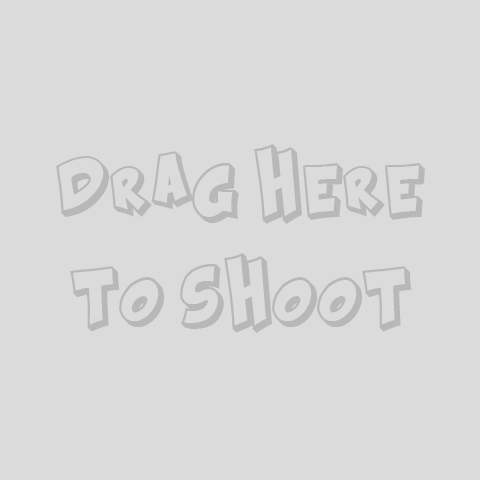
<style>
.page{position:relative;width:480px;height:480px;background:#dbdbdb}
.page>*{position:absolute;margin:0}
.t1{font:38px/109px "Kraash";color:#b8b8b8}
</style>
<div class="page">
<p class="t1" style="left:56px;top:144px;width:369px;height:189px;text-align:center">Drag here<br>to shoot</p>
</div>
